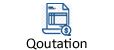
<style>
.page{position:relative;width:114px;height:50px;background:#ffffff}
.page>*{position:absolute;margin:0}
.t1{font:14.5px "Calibri";color:#000000;scale:1.03 1}
</style>
<div class="page">
<p class="t1" style="left:26px;top:38px;width:61px;height:12px">Qoutation</p>
</div>
